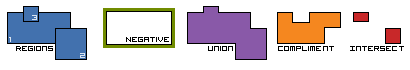
<style>
.page{position:relative;width:410px;height:70px;background:#ffffff}
.page>*{position:absolute;margin:0}
.t1{font:12px "VisitorTT2BRK";color:#d9e3ef}
.t2{font:13px "VisitorTT2BRK";color:#000000}
</style>
<div class="page">
<p class="t1" style="left:32px;top:15px;width:5px;height:5px">3</p>
<p class="t1" style="left:9px;top:37px;width:2px;height:5px">1</p>
<p class="t2" style="left:126px;top:37px;width:43px;height:5px">Negative</p>
<p class="t2" style="left:16px;top:46px;width:37px;height:5px">Regions</p>
<p class="t1" style="left:80px;top:53px;width:5px;height:5px">2</p>
<p class="t2" style="left:208px;top:46px;width:25px;height:5px">Union</p>
<p class="t2" style="left:278px;top:46px;width:56px;height:5px">Compliment</p>
<p class="t2" style="left:350px;top:46px;width:54px;height:5px">Intersect</p>
</div>
